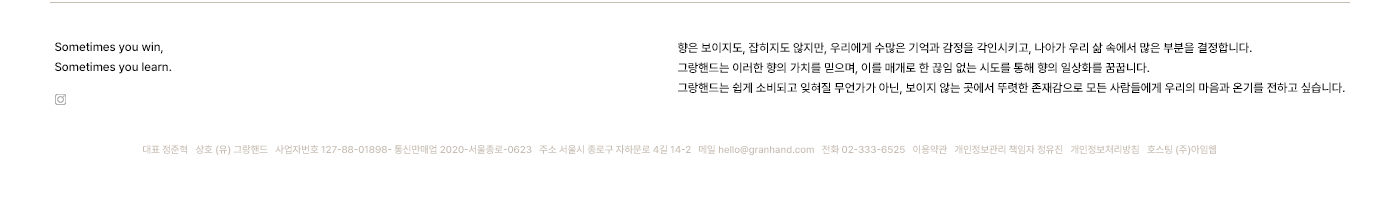
<style>
.page{position:relative;width:1400px;height:200px;background:#ffffff}
.page>*{position:absolute;margin:0}
.t1{font:12px/20px "Pretendard-Medium";color:#000000}
.t2{font:10px "Pretendard-Medium";color:#c6bcb2}
</style>
<div class="page">
<p class="t1" style="left:55px;top:42px;width:117px;height:32px">Sometimes you win,<br>Sometimes you learn.</p>
<p class="t1" style="left:678px;top:42px;width:667px;height:53px">향은 보이지도, 잡히지도 않지만, 우리에게 수많은 기억과 감정을 각인시키고, 나아가 우리 삶 속에서 많은 부분을 결정합니다.<br>그랑핸드는 이러한 향의 가치를 믿으며, 이를 매개로 한 끊임 없는 시도를 통해 향의 일상화를 꿈꿉니다.<br>그랑핸드는 쉽게 소비되고 잊혀질 무언가가 아닌, 보이지 않는 곳에서 뚜렷한 존재감으로 모든 사람들에게 우리의 마음과 온기를 전하고 싶습니다.</p>
<p class="t2" style="left:143px;top:145px;width:1073px;height:10px">대표 정준혁   상호 (유) 그랑핸드   사업자번호 127-88-01898- 통신만매업 2020-서울종로-0623   주소 서울시 종로구 자하문로 4길 14-2   메일 hello@granhand.com   전화 02-333-6525   이용약관   개인정보관리 책임자 정유진   개인정보처리방침   호스팅 (주)아임웹</p>
</div>
